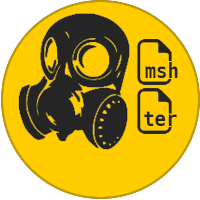
<style>
.page{position:relative;width:200px;height:200px;background:#ffcc00}
.page>*{position:absolute;margin:0}
.t1{font:20px "MesloLGL-Bold";color:#252525;scale:0.94 1}
</style>
<div class="page">
<p class="t1" style="left:145px;top:62px;width:33px;height:16px">msh</p>
<p class="t1" style="left:144px;top:111px;width:33px;height:15px">ter</p>
</div>
